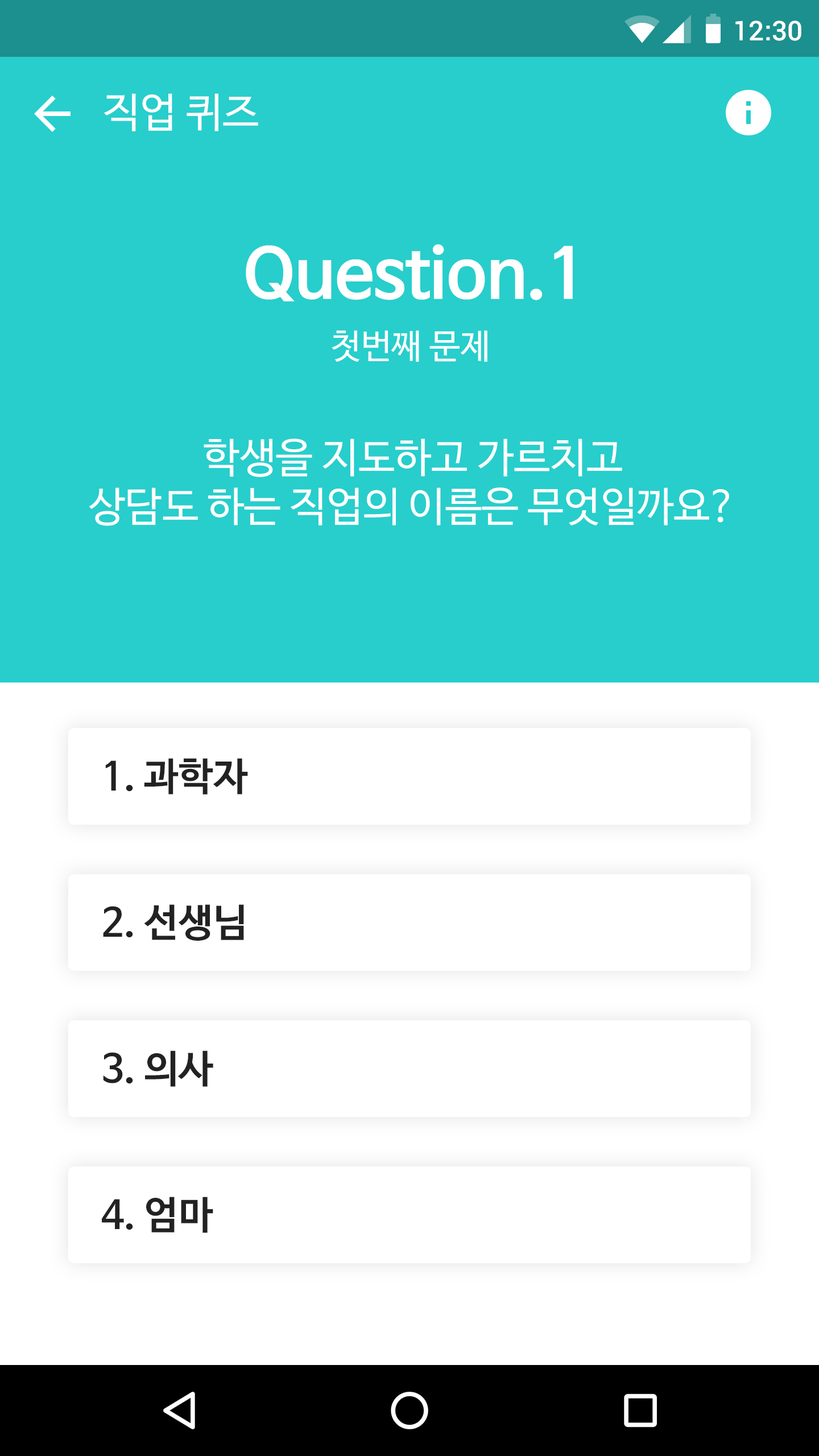
<style>
.page{position:relative;width:819px;height:1456px;background:#ffffff}
.page>*{position:absolute;margin:0}
.t1{font:27.3px "Roboto-Medium";color:#ffffff}
.t2{font:40.9px "NanumBarunGothic";color:#ffffff}
.t3{font:68.2px "NanumBarunGothicBold";color:#ffffff}
.t4{font:34.1px "NanumBarunGothic";color:#ffffff}
.t5{font:38.7px "NanumBarunGothicBold";color:#222222}
</style>
<div class="page">
<p class="t1" style="left:735px;top:20px;width:66px;height:21px">12:30</p>
<p class="t2" style="left:104px;top:93px;width:154px;height:38px">직업 퀴즈</p>
<p class="t3" style="left:246px;top:244px;width:327px;height:57px">Question.1</p>
<p class="t4" style="left:332px;top:330px;width:155px;height:32px">첫번째 문제</p>
<p class="t2" style="left:89px;top:439px;width:640px;height:87px;text-align:center">학생을 지도하고 가르치고<br>상담도 하는 직업의 이름은 무엇일까요?</p>
<p class="t5" style="left:105px;top:758px;width:143px;height:37px">1. 과학자</p>
<p class="t5" style="left:103px;top:904px;width:141px;height:37px">2. 선생님</p>
<p class="t5" style="left:103px;top:1050px;width:110px;height:37px">3. 의사</p>
<p class="t5" style="left:102px;top:1197px;width:111px;height:36px">4. 엄마</p>
</div>
